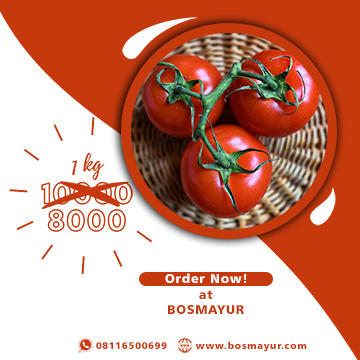
<style>
.page{position:relative;width:360px;height:360px;background:#ffffff}
.page>*{position:absolute;margin:0}
.t1{font:12.6px "Humanist777BT-BlackB";letter-spacing:0.06em;color:#fefefe}
.t2{font:12.6px "Humanist777BT-BlackB";letter-spacing:0.06em;color:#c5390d}
.t3{font:9.8px "Humanist777BT-BlackB";letter-spacing:0.06em;color:#c5390d}
</style>
<div class="page">
<p class="t1" style="left:165px;top:273px;width:82px;height:10px">Order Now!</p>
<p class="t2" style="left:199px;top:290px;width:14px;height:9px">at</p>
<p class="t2" style="left:168px;top:305px;width:76px;height:9px">BOSMAYUR</p>
<p class="t3" style="left:96px;top:342px;width:71px;height:7px">08116500699</p>
<p class="t3" style="left:195px;top:341px;width:112px;height:11px">www.bosmayur.com</p>
</div>
